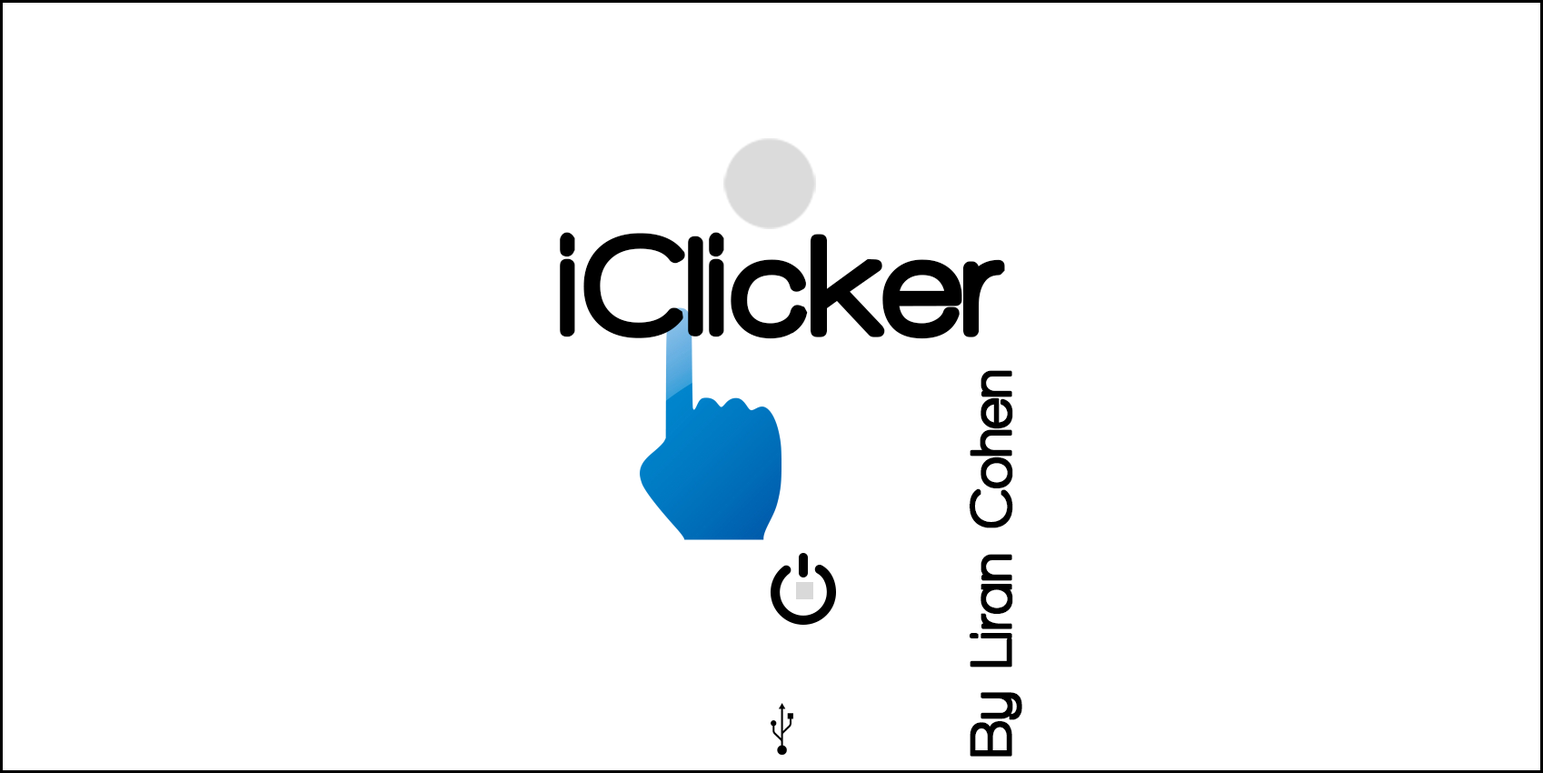
<style>
.page{position:relative;width:1543px;height:773px;background:#ffffff}
.page>*{position:absolute;margin:0}
.t1{font:144.5px "WalkwayRounded";color:#000000;font-weight:bold;scale:1.08 1}
.t2{font:60.6px "WalkwayRounded";color:#000000;font-weight:bold}
</style>
<div class="page">
<p class="t1" style="left:560px;top:232px;width:445px;height:107px">iClicker</p>
<p class="t2" style="left:970px;top:370px;width:53px;height:386px;rotate:-90deg">By Liran Cohen</p>
</div>
